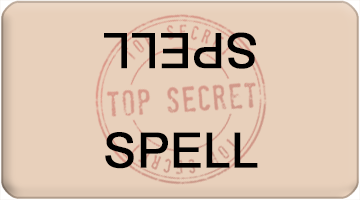
<style>
.page{position:relative;width:360px;height:200px;background:#e8d0bb}
.page>*{position:absolute;margin:0}
.t1{font:48px "ArialMT";color:#000000;font-weight:bold}
</style>
<div class="page">
<p class="t1" style="left:104px;top:32px;width:152px;height:37px;rotate:180deg">SPELL</p>
<p class="t1" style="left:105px;top:132px;width:153px;height:37px">SPELL</p>
</div>
